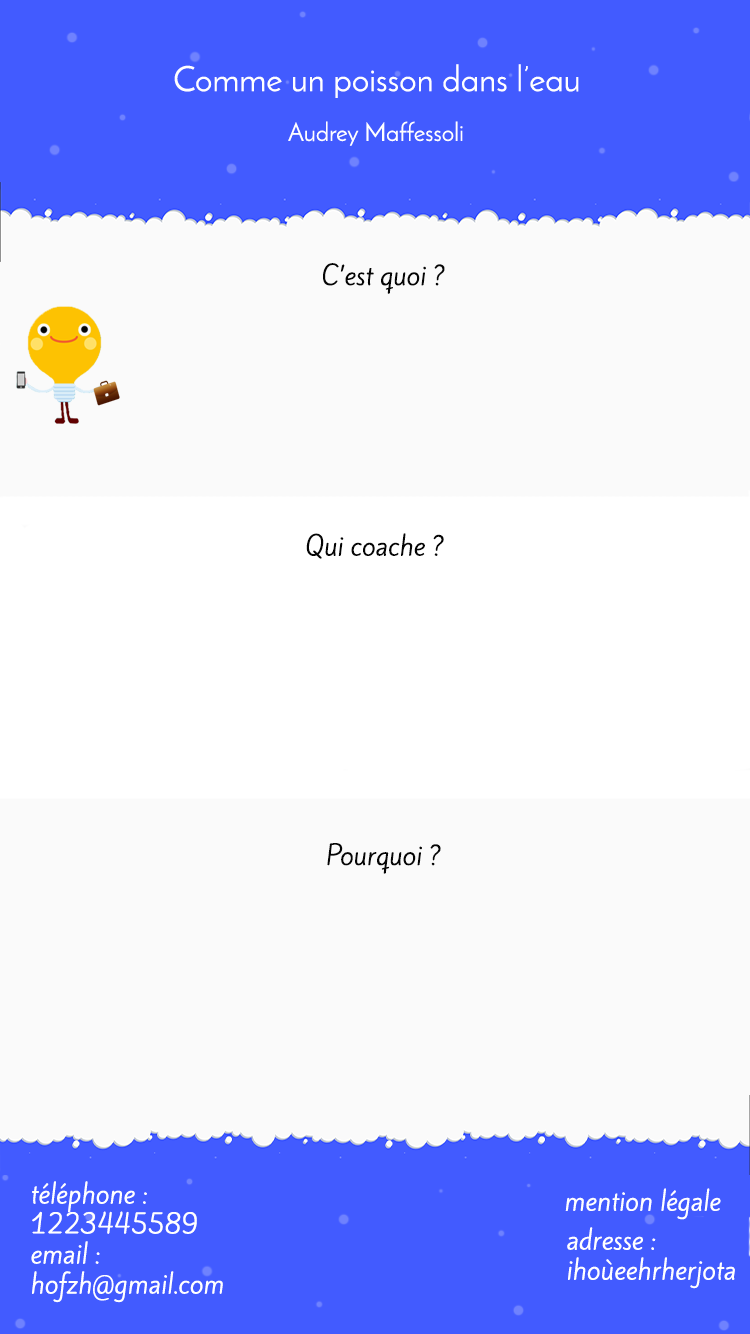
<style>
.page{position:relative;width:750px;height:1334px;background:#fafafa}
.page>*{position:absolute;margin:0}
.t1{font:35px "JosefinSans";color:#ffffff}
.t2{font:25px "JosefinSans";color:#ffffff}
.t3{font:25px "KiteOne-Regular";color:#050505}
.t4{font:25px "KiteOne-Regular";color:#ffffff}
</style>
<div class="page">
<p class="t1" style="left:174px;top:64px;width:405px;height:34px">Comme un poisson dans l’eau</p>
<p class="t2" style="left:288px;top:121px;width:175px;height:25px">Audrey Maffessoli</p>
<p class="t3" style="left:323px;top:263px;width:122px;height:31px">C’est quoi ?</p>
<p class="t3" style="left:306px;top:533px;width:138px;height:26px">Qui coache ?</p>
<p class="t3" style="left:327px;top:843px;width:114px;height:31px">Pourquoi ?</p>
<p class="t4" style="left:31px;top:1181px;width:192px;height:122px">téléphone :<br>1223445589<br>email :<br>hofzh@gmail.com</p>
<p class="t4" style="left:565px;top:1188px;width:156px;height:32px">mention légale</p>
<p class="t4" style="left:567px;top:1227px;width:168px;height:62px">adresse :<br>ihoùeehrherjota</p>
</div>
